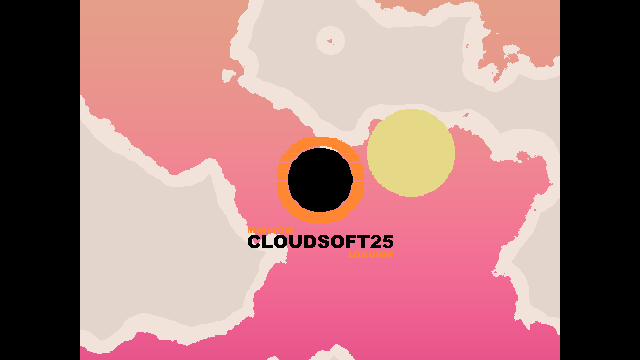
<style>
.page{position:relative;width:640px;height:360px;background:#000000}
.page>*{position:absolute;margin:0}
.t1{font:9px "Arial-Black";color:#ff8731}
.t2{font:18px "Arial-Black";color:#000000}
</style>
<div class="page">
<p class="t1" style="left:248px;top:226px;width:45px;height:7px">MINICOM</p>
<p class="t2" style="left:248px;top:235px;width:145px;height:13px">CLOUDSOFT25</p>
<p class="t1" style="left:349px;top:251px;width:44px;height:7px">LOADING</p>
</div>
